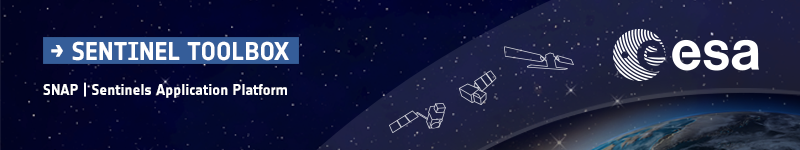
<style>
.page{position:relative;width:800px;height:150px}
.page>*{position:absolute;margin:0}
.t1{font:25.2px "NotesEsa-Bold";color:#ffffff;text-transform:uppercase}
.t2{font:15.1px "NotesEsa-Bold";color:#ffffff}
.t3{font:15.1px "NotesEsa-Bold";color:#ffffff;text-transform:uppercase}
</style>
<div class="page">
<p class="t1" style="left:51px;top:41px;width:238px;height:20px">→ sentinel toolbox</p>
<p class="t2" style="left:43px;top:82px;width:244px;height:16px"><span class="t3">snap | </span>Sentinels Application Platform</p>
</div>
